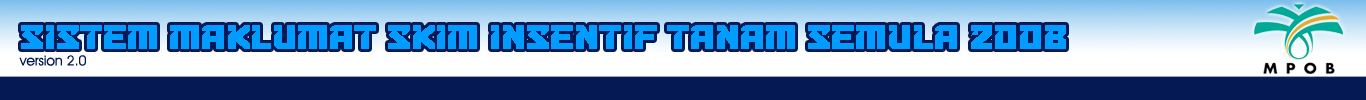
<style>
.page{position:relative;width:1366px;height:100px;background:#051a55}
.page>*{position:absolute;margin:0}
.t1{font:36px "BulletproofDecoBB";color:#019cff}
.t2{font:14px "AvantGardeITCbyBT-Book";color:#051a55}
</style>
<div class="page">
<p class="t1" style="left:21px;top:25px;width:1045px;height:24px">SISTEM MAKLUMAT SKIM INSENTIF TANAM SEMULA 2008</p>
<p class="t2" style="left:19px;top:55px;width:67px;height:11px">version 2.0</p>
</div>
